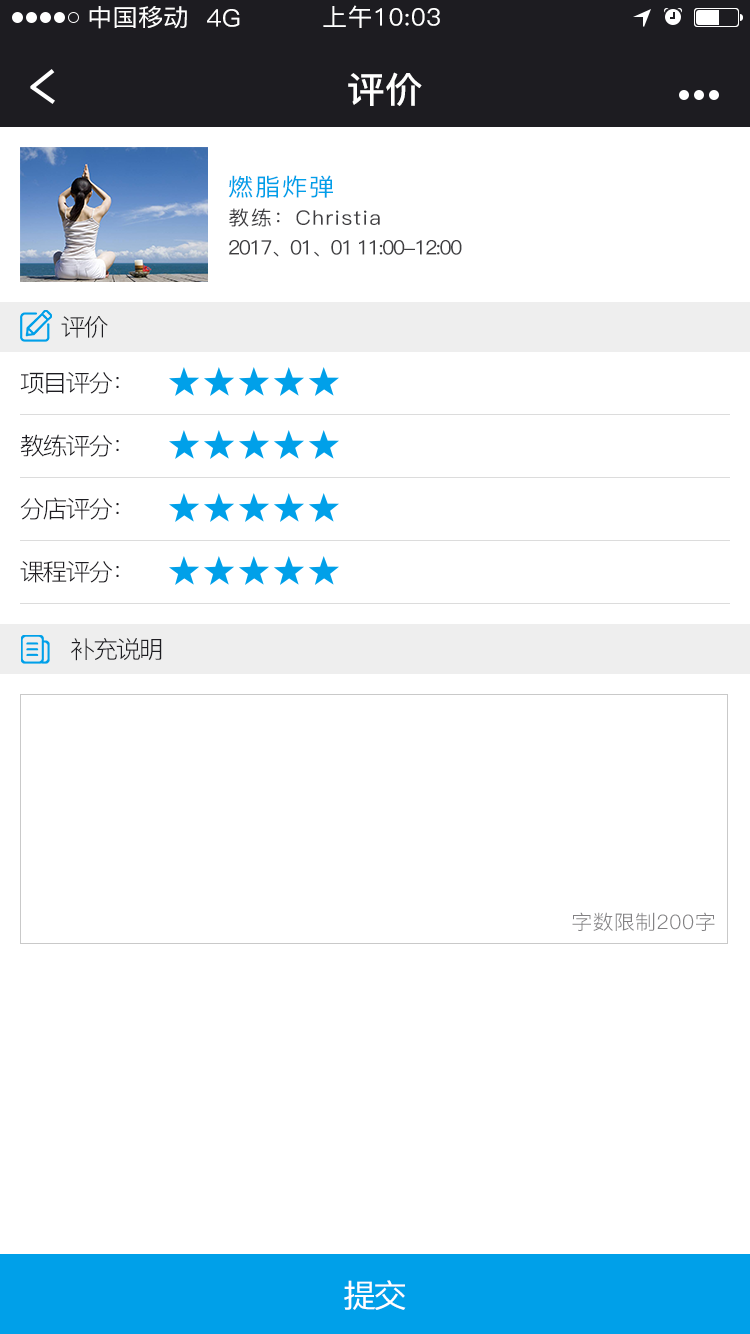
<style>
.page{position:relative;width:750px;height:1334px;background:#ffffff}
.page>*{position:absolute;margin:0}
.t1{font:24px "PingFang-SC-Medium";letter-spacing:0.01em;color:#ffffff;scale:1.05 1}
.t2{font:36px "PingFang-SC-Bold";letter-spacing:0.01em;color:#ffffff;scale:1.05 1}
.t3{font:24px "PingFang-SC-Medium";letter-spacing:0.07em;color:#00a0e9;scale:1.05 1}
.t4{font:20px "PingFang-SC-Medium";letter-spacing:0.07em;color:#3f3e41;scale:1.05 1}
.t5{font:20px "PingFang-SC-Medium";letter-spacing:-0.09em;color:#3f3e41;scale:1.05 1}
.t6{font:24px "PingFang-SC-Regular";letter-spacing:-0.09em;color:#1d1c21;scale:1.05 1}
.t7{font:20px "PingFang-SC-Regular";letter-spacing:0.01em;color:#828183;scale:1.05 1}
.t8{font:32px "PingFang-SC-Medium";letter-spacing:-0.09em;color:#ffffff;scale:1.05 1}
</style>
<div class="page">
<p class="t1" style="left:89px;top:6px;width:98px;height:23px">中国移动</p>
<p class="t1" style="left:323px;top:5px;width:117px;height:23px">上午10:03</p>
<p class="t1" style="left:207px;top:9px;width:33px;height:18px">4G</p>
<p class="t2" style="left:348px;top:72px;width:74px;height:34px">评价</p>
<p class="t3" style="left:228px;top:175px;width:105px;height:23px">燃脂炸弹</p>
<p class="t4" style="left:229px;top:208px;width:151px;height:19px">教练：Christia</p>
<p class="t5" style="left:229px;top:240px;width:233px;height:17px">2017、01、01 11:00-12:00</p>
<p class="t6" style="left:61px;top:316px;width:47px;height:22px">评价</p>
<p class="t6" style="left:20px;top:372px;width:99px;height:22px">项目评分：</p>
<p class="t6" style="left:20px;top:434px;width:99px;height:23px">教练评分：</p>
<p class="t6" style="left:20px;top:497px;width:99px;height:23px">分店评分：</p>
<p class="t6" style="left:20px;top:561px;width:99px;height:22px">课程评分：</p>
<p class="t6" style="left:71px;top:638px;width:91px;height:23px">补充说明</p>
<p class="t7" style="left:572px;top:912px;width:143px;height:19px">字数限制200字</p>
<p class="t8" style="left:344px;top:1280px;width:62px;height:30px">提交</p>
</div>
